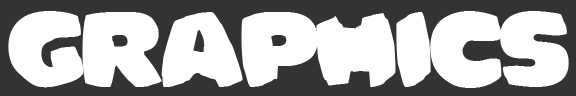
<style>
.page{position:relative;width:576px;height:96px;background:#fefefe}
.page>*{position:absolute;margin:0}
.t1{font:100px "Bomberman";color:#fefefe}
</style>
<div class="page">
<p class="t1" style="left:8px;top:11px;width:561px;height:77px">Graphics</p>
</div>
